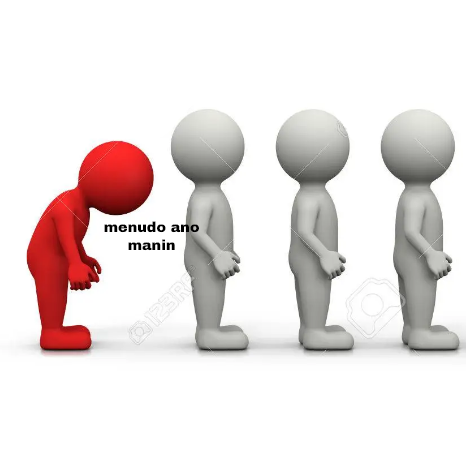
<style>
.page{position:relative;width:466px;height:466px;background:#ffffff}
.page>*{position:absolute;margin:0}
.t1{font:14.3px "ArchivoBlack-Regular";color:#000000}
</style>
<div class="page">
<p class="t1" style="left:104px;top:221px;width:95px;height:30px;text-align:center">menudo ano<br>manin</p>
</div>
